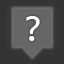
<style>
.page{position:relative;width:64px;height:64px;background:#666666}
.page>*{position:absolute;margin:0}
.t1{font:40px "EstrangeloEdessa";color:#ffffff}
</style>
<div class="page">
<p class="t1" style="left:26px;top:16px;width:14px;height:25px">?</p>
</div>
